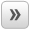
<style>
.page{position:relative;width:30px;height:30px}
.page>*{position:absolute;margin:0}
.t1{font:24px "Arial-BoldMT";letter-spacing:-0.025em;color:#555555}
</style>
<div class="page">
<p class="t1" style="left:9px;top:9px;width:12px;height:12px">»</p>
</div>
